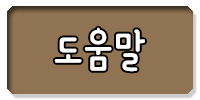
<style>
.page{position:relative;width:200px;height:100px;background:#907353}
.page>*{position:absolute;margin:0}
.t1{font:48.9px "YanoljaYacheR";color:#ffffff}
</style>
<div class="page">
<p class="t1" style="left:54px;top:27px;width:91px;height:45px">도움말</p>
</div>
